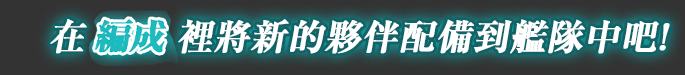
<style>
.page{position:relative;width:685px;height:75px;background:#333333}
.page>*{position:absolute;margin:0}
.t1{font:36px "RyuminPro-Bold";color:#ffffff;font-weight:bold;font-style:italic}
</style>
<div class="page">
<p class="t1" style="left:50px;top:19px;width:620px;height:35px">在       裡將新的夥伴配備到艦隊中吧!</p>
</div>
